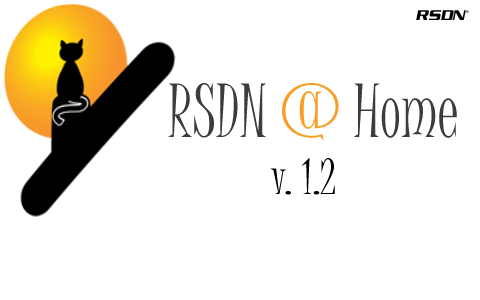
<style>
.page{position:relative;width:480px;height:300px;background:#ffffff}
.page>*{position:absolute;margin:0}
.t1{font:72px "JuiceITC-Regular";color:#3c3c3c}
.t2{font:72px "JuiceITC-Regular";color:#f89f28}
.t3{font:48px "JuiceITC-Regular";color:#000000}
</style>
<div class="page">
<p class="t1" style="left:168px;top:83px;width:289px;height:59px">RSDN <span class="t2">@</span> Home</p>
<p class="t3" style="left:270px;top:157px;width:65px;height:38px">v. 1.2</p>
</div>
